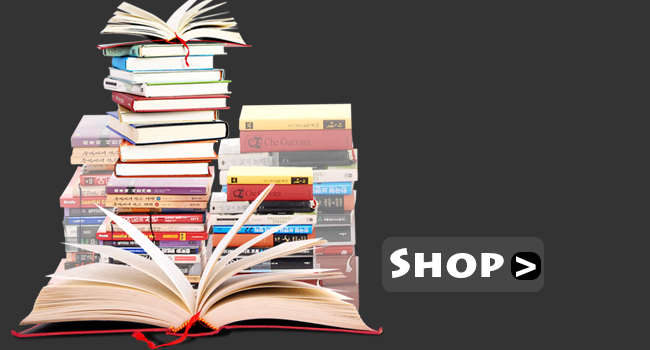
<style>
.page{position:relative;width:650px;height:350px;background:#333333}
.page>*{position:absolute;margin:0}
.t1{font:40px "LithosPro-Black";color:#ffffff}
</style>
<div class="page">
<p class="t1" style="left:390px;top:248px;width:146px;height:30px">Shop &gt;</p>
</div>
